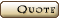
<style>
.page{position:relative;width:59px;height:19px}
.page>*{position:absolute;margin:0}
.t1{font:11px "Lumos";letter-spacing:0.1em;color:#000000}
</style>
<div class="page">
<p class="t1" style="left:17px;top:5px;width:38px;height:9px">Quote</p>
</div>
